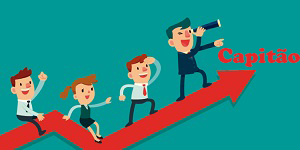
<style>
.page{position:relative;width:300px;height:150px;background:#009996}
.page>*{position:absolute;margin:0}
.t1{font:20px "CooperBlackStd";color:#e42829}
</style>
<div class="page">
<p class="t1" style="left:218px;top:48px;width:82px;height:19px">Capitão</p>
</div>
